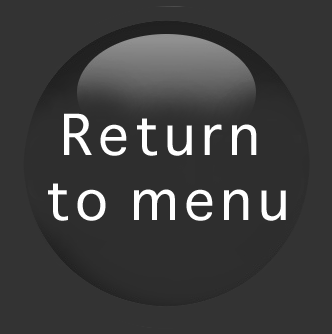
<style>
.page{position:relative;width:332px;height:334px;background:#333333}
.page>*{position:absolute;margin:0}
.t1{font:54.3px "Sathu";letter-spacing:0.1em;color:#ffffff}
</style>
<div class="page">
<p class="t1" style="left:48px;top:113px;width:238px;height:108px;text-align:center">Return <br>to menu</p>
</div>
